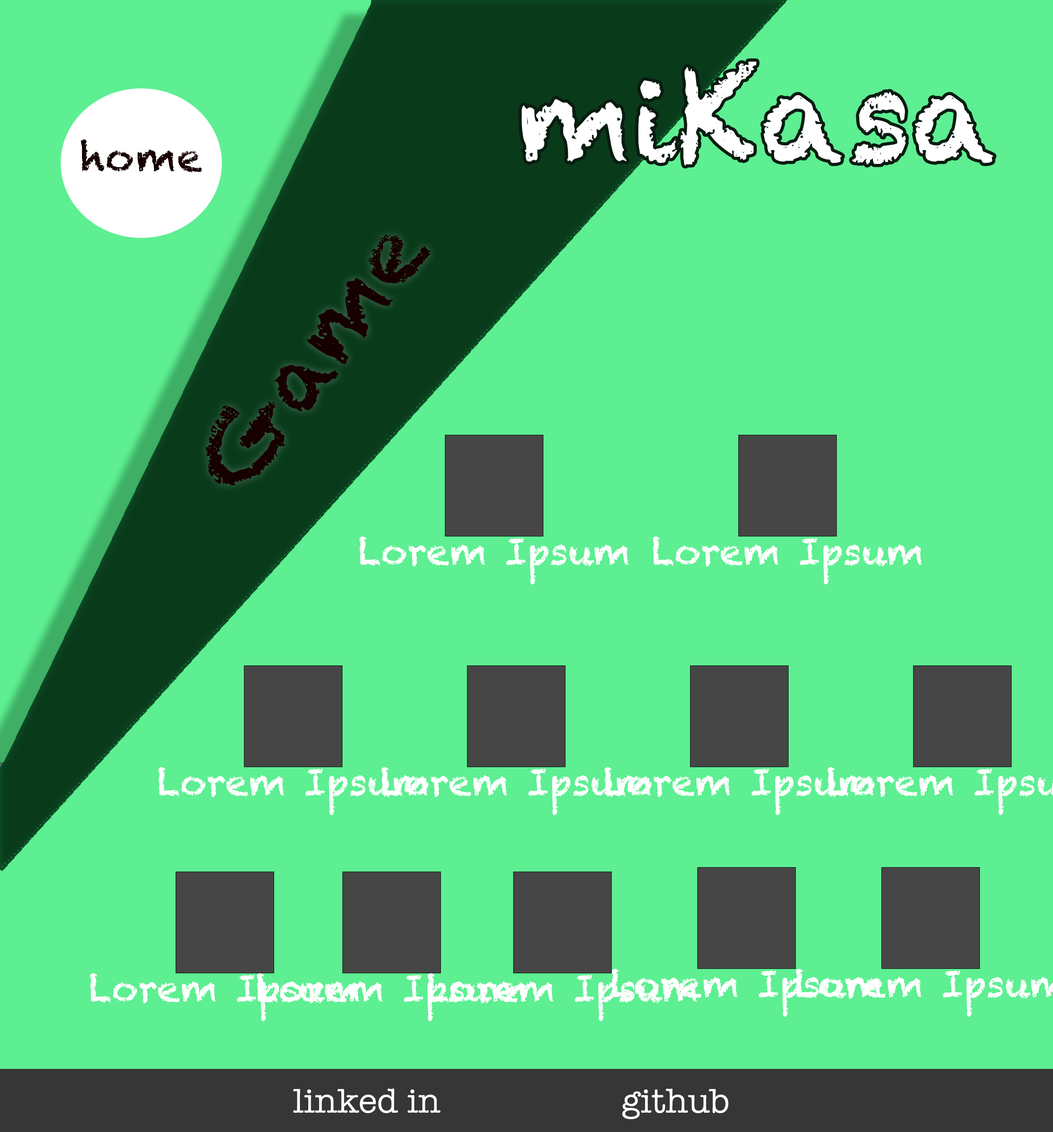
<style>
.page{position:relative;width:1053px;height:1132px;background:#5def92}
.page>*{position:absolute;margin:0}
.t1{font:125.6px "Chalkduster";color:#ffffff}
.t2{font:113.9px "Chalkduster";color:#ffffff}
.t3{font:40.2px "Chalkduster";color:#170000}
.t4{font:92.1px "Chalkduster";color:#170000}
.t5{font:36.9px "Chalkduster";color:#ffffff}
.t6{font:35.2px "AmericanTypewriter";color:#fdfdfd}
</style>
<div class="page">
<p class="t1" style="left:522px;top:61px;width:472px;height:105px"><span class="t2">mi</span>Kasa</p>
<p class="t3" style="left:81px;top:139px;width:121px;height:33px">home</p>
<p class="t4" style="left:205px;top:234px;width:226px;height:252px;rotate:-53deg">Game</p>
<p class="t5" style="left:359px;top:536px;width:270px;height:49px">Lorem Ipsum</p>
<p class="t5" style="left:653px;top:536px;width:269px;height:49px">Lorem Ipsum</p>
<p class="t5" style="left:158px;top:767px;width:270px;height:49px">Lorem Ipsum</p>
<p class="t5" style="left:381px;top:767px;width:270px;height:49px">Lorem Ipsum</p>
<p class="t5" style="left:605px;top:767px;width:269px;height:49px">Lorem Ipsum</p>
<p class="t5" style="left:90px;top:973px;width:270px;height:49px">Lorem Ipsum</p>
<p class="t5" style="left:257px;top:973px;width:270px;height:49px">Lorem Ipsum</p>
<p class="t5" style="left:428px;top:973px;width:269px;height:49px">Lorem Ipsum</p>
<p class="t5" style="left:612px;top:969px;width:269px;height:48px">Lorem Ipsum</p>
<p class="t6" style="left:293px;top:1089px;width:436px;height:30px">linked in  github</p>
</div>
